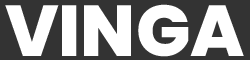
<style>
.page{position:relative;width:250px;height:60px;background:#333333}
.page>*{position:absolute;margin:0}
.t1{font:72px "Poppins-ExtraBold";color:#ffffff}
</style>
<div class="page">
<p class="t1" style="left:5px;top:4px;width:239px;height:53px">VINGA</p>
</div>
